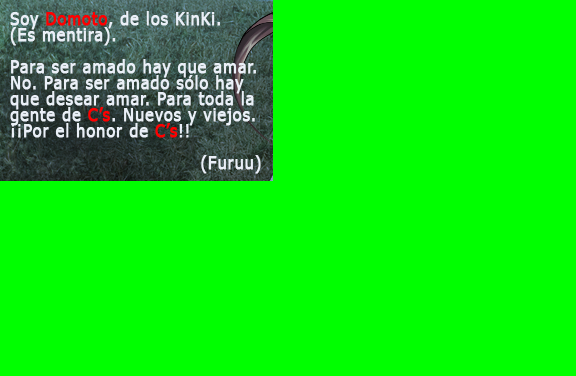
<style>
.page{position:relative;width:576px;height:376px;background:#00ff00}
.page>*{position:absolute;margin:0}
.t1{font:18px/16px "Tahoma";letter-spacing:0.04em;color:#eaeff7;font-weight:bold;scale:0.9 1}
.t2{font:18px/16px "Tahoma";letter-spacing:0.04em;color:#ff0000;font-weight:bold;scale:0.9 1}
</style>
<div class="page">
<p class="t1" style="left:10px;top:11px;width:251px;height:163px">Soy <span class="t2">Domoto</span>, de los KinKi. <br>(Es mentira).<br><br>Para ser amado hay que amar.<br>No. Para ser amado sólo hay<br>que desear amar. Para toda la<br>gente de <span class="t2">C’s</span>. Nuevos y viejos.<br>¡¡Por el honor de <span class="t2">C’s</span>!!<br><br>                               (Furuu)</p>
</div>
